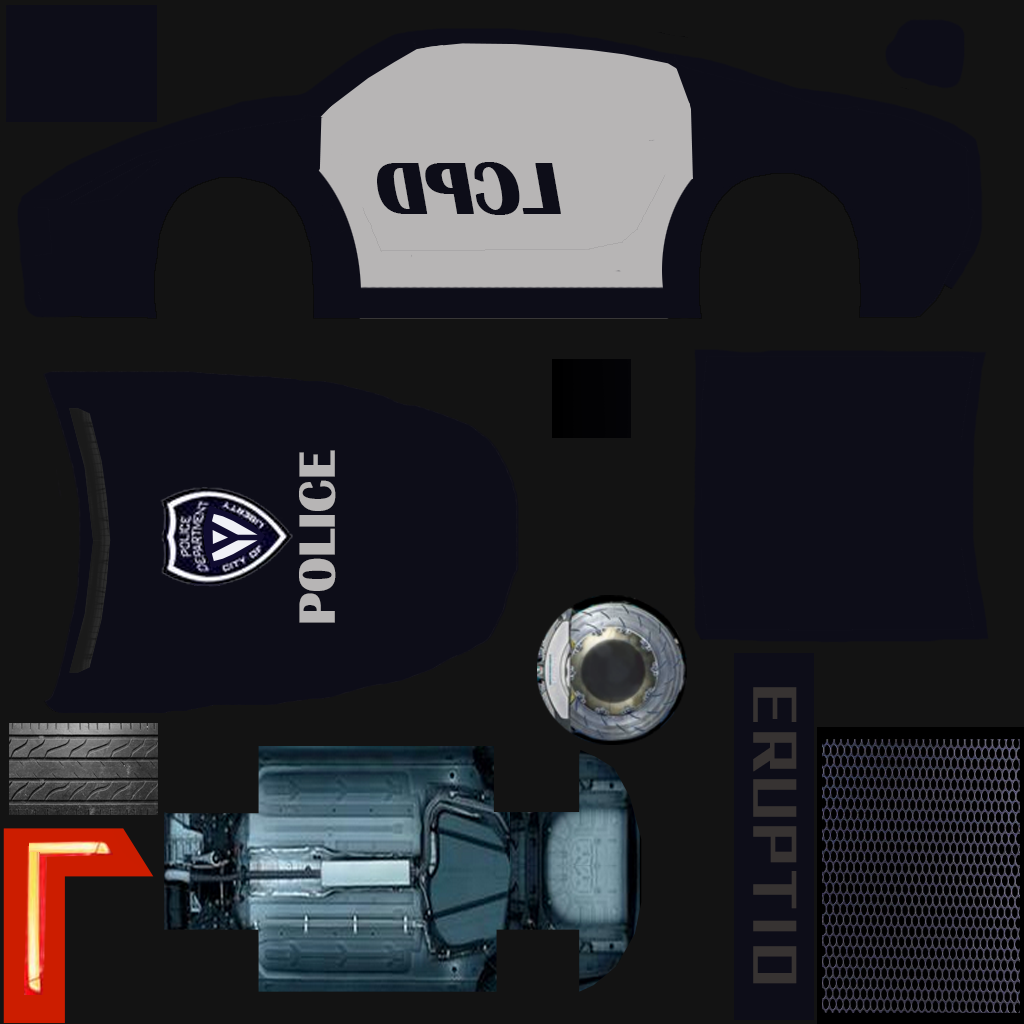
<style>
.page{position:relative;width:1024px;height:1024px;background:#131313}
.page>*{position:absolute;margin:0}
.t1{font:74.8px "BritannicBold";color:#0d0d18;font-weight:bold;font-style:italic}
.t2{font:51.7px "BritannicBold";color:#b7b5b5;font-weight:bold}
.t3{font:57.9px "BigruixianBoldkGBV1.0";color:#373332;font-weight:bold}
</style>
<div class="page">
<p class="t1" style="left:377px;top:162px;width:184px;height:53px;rotate:180deg">LCPD</p>
<p class="t2" style="left:299px;top:450px;width:37px;height:173px;rotate:-90deg">POLICE</p>
<p class="t3" style="left:753px;top:687px;width:44px;height:297px;rotate:90deg">ERUPTIO</p>
</div>
